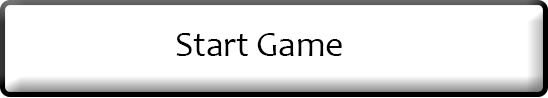
<style>
.page{position:relative;width:548px;height:98px;background:#ffffff}
.page>*{position:absolute;margin:0}
.t1{font:35.6px "Candara";color:#000000}
</style>
<div class="page">
<p class="t1" style="left:176px;top:33px;width:166px;height:23px">Start Game</p>
</div>
